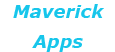
<style>
.page{position:relative;width:115px;height:52px;background:#ffffff}
.page>*{position:absolute;margin:0}
.t1{font:18px "Verdana-BoldItalic";color:#17c6eb}
</style>
<div class="page">
<p class="t1" style="left:13px;top:4px;width:91px;height:48px;text-align:center">Maverick<br>Apps</p>
</div>
